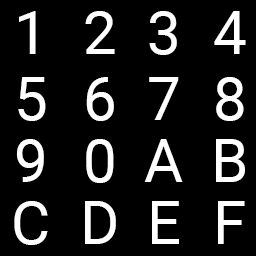
<style>
.page{position:relative;width:256px;height:256px;background:#000000}
.page>*{position:absolute;margin:0}
.t1{font:60px "Roboto-Regular";letter-spacing:-0.04em;color:#ffffff;text-transform:uppercase}
</style>
<div class="page">
<p class="t1" style="left:19px;top:11px;width:17px;height:43px">1</p>
<p class="t1" style="left:85px;top:11px;width:30px;height:43px">2</p>
<p class="t1" style="left:149px;top:11px;width:28px;height:44px">3</p>
<p class="t1" style="left:214px;top:11px;width:32px;height:43px">4</p>
<p class="t1" style="left:18px;top:77px;width:28px;height:44px">5</p>
<p class="t1" style="left:86px;top:77px;width:28px;height:44px">6</p>
<p class="t1" style="left:149px;top:77px;width:30px;height:43px">7</p>
<p class="t1" style="left:216px;top:77px;width:28px;height:44px">8</p>
<p class="t1" style="left:16px;top:139px;width:28px;height:43px">9</p>
<p class="t1" style="left:86px;top:139px;width:28px;height:44px">0</p>
<p class="t1" style="left:144px;top:139px;width:39px;height:43px">A</p>
<p class="t1" style="left:216px;top:139px;width:29px;height:43px">B</p>
<p class="t1" style="left:14px;top:201px;width:34px;height:44px">C</p>
<p class="t1" style="left:85px;top:201px;width:31px;height:43px">D</p>
<p class="t1" style="left:152px;top:201px;width:27px;height:43px">E</p>
<p class="t1" style="left:218px;top:201px;width:27px;height:43px">F</p>
</div>
